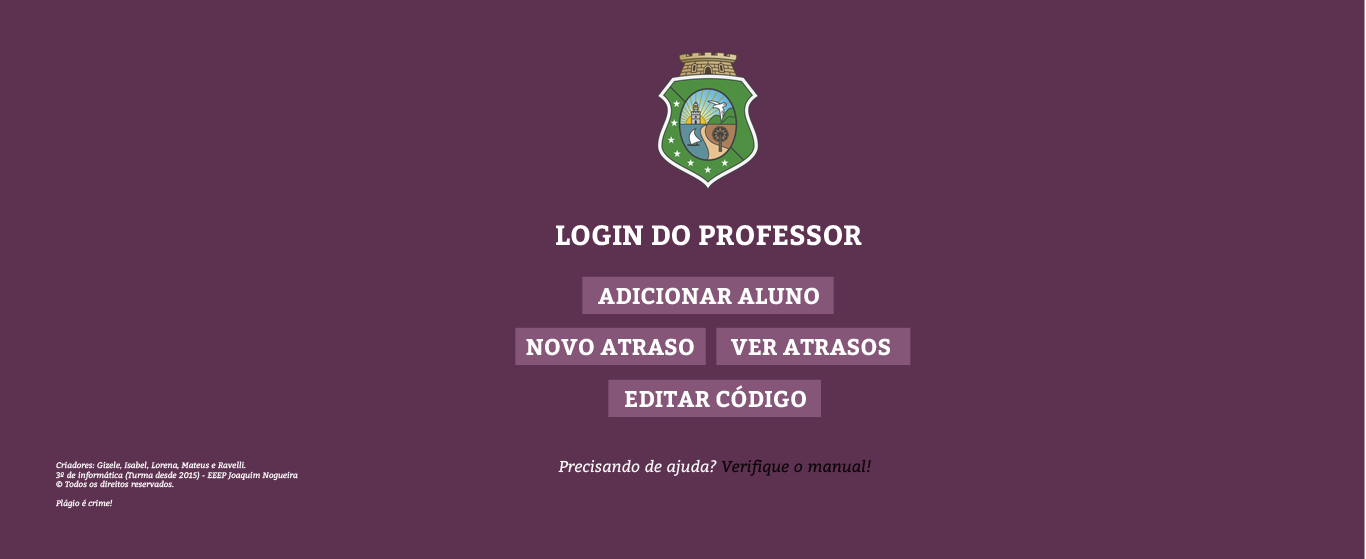
<style>
.page{position:relative;width:1366px;height:559px;background:#5d3250}
.page>*{position:absolute;margin:0}
.t1{font:27.7px "Bitter-Bold";color:#ffffff}
.t2{font:22.8px "Bitter-Bold";color:#fefefe}
.t3{font:8px "Bitter-Italic";color:#fffefe}
.t4{font:15.8px "Bitter-Italic";color:#fffefe}
.t5{font:15.8px "Bitter-Italic";color:#0c0309}
</style>
<div class="page">
<p class="t1" style="left:556px;top:225px;width:306px;height:21px">LOGIN DO PROFESSOR</p>
<p class="t2" style="left:598px;top:287px;width:221px;height:18px">ADICIONAR ALUNO</p>
<p class="t2" style="left:526px;top:338px;width:168px;height:18px">NOVO ATRASO</p>
<p class="t2" style="left:731px;top:338px;width:159px;height:18px">VER ATRASOS</p>
<p class="t2" style="left:625px;top:385px;width:181px;height:23px">EDITAR CÓDIGO</p>
<p class="t3" style="left:55px;top:461px;width:243px;height:48px">Criadores: Gizele, Isabel, Lorena, Mateus e Ravelli.<br>3º de informática (Turma desde 2015) - EEEP Joaquim Nogueira<br>© Todos os direitos reservados.<br><br>Plágio é crime!</p>
<p class="t4" style="left:558px;top:459px;width:313px;height:17px">Precisando de ajuda? <span class="t5">Verifique o manual!</span></p>
</div>
